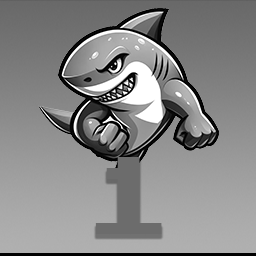
<style>
.page{position:relative;width:256px;height:256px}
.page>*{position:absolute;margin:0}
.t1{font:87.2px "PressStart2P-Regular";color:#6c6c6c}
</style>
<div class="page">
<p class="t1" style="left:95px;top:157px;width:67px;height:77px">1</p>
</div>
